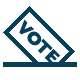
<style>
.page{position:relative;width:80px;height:80px;background:#ffffff}
.page>*{position:absolute;margin:0}
.t1{font:18px "GillSans-Bold";letter-spacing:-0.025em;color:#0a3f5a;text-transform:uppercase}
</style>
<div class="page">
<p class="t1" style="left:19px;top:19px;width:41px;height:46px;rotate:45deg">VOTE</p>
</div>
